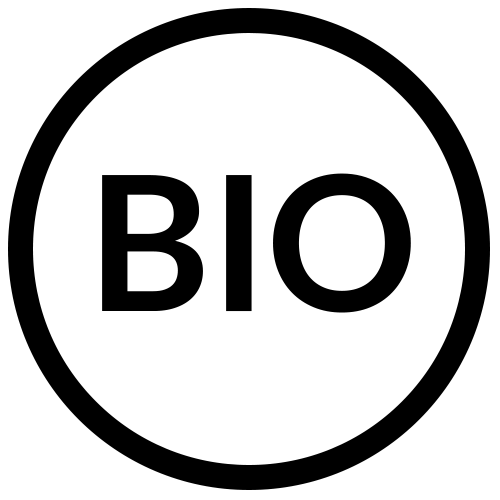
<style>
.page{position:relative;width:500px;height:500px;background:#ffffff}
.page>*{position:absolute;margin:0}
.t1{font:187.5px "Lato-Bold";color:#000000}
</style>
<div class="page">
<p class="t1" style="left:102px;top:173px;width:309px;height:140px">BIO</p>
</div>
